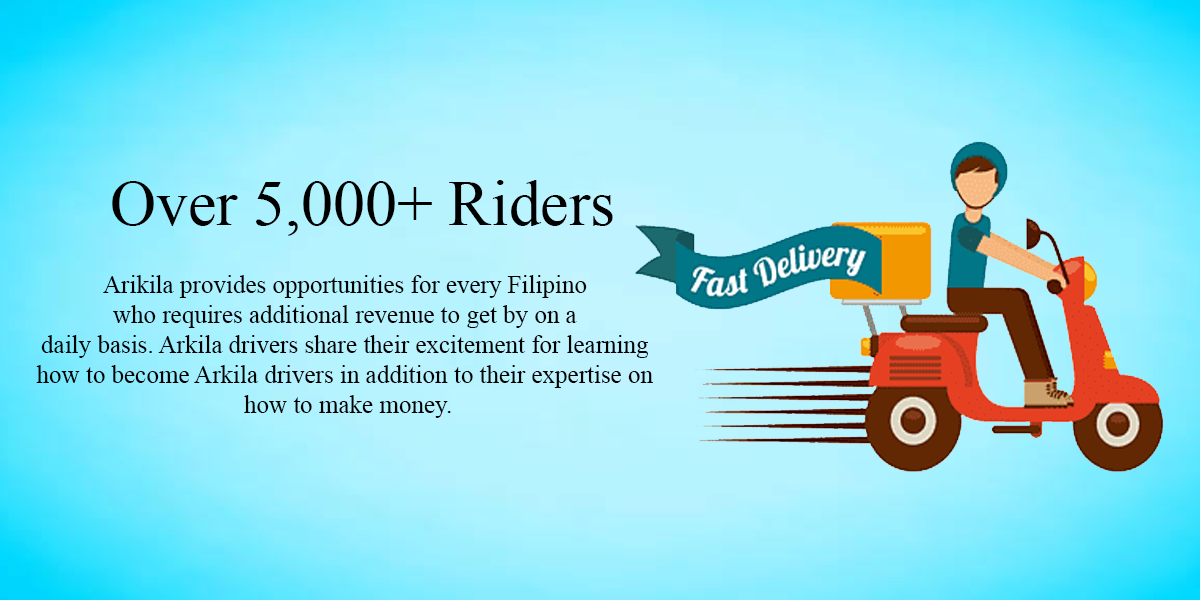
<style>
.page{position:relative;width:1200px;height:600px}
.page>*{position:absolute;margin:0}
.t1{font:64.2px "TimesNewRomanPSMT";color:#000000}
.t2{font:25px "TimesNewRomanPSMT";color:#000000}
</style>
<div class="page">
<p class="t1" style="left:112px;top:180px;width:501px;height:56px">Over 5,000+ Riders</p>
<p class="t2" style="left:36px;top:275px;width:617px;height:143px;text-align:center">Arikila provides opportunities for every Filipino <br>who requires additional revenue to get by on a <br>daily basis. Arkila drivers share their excitement for learning <br>how to become Arkila drivers in addition to their expertise on <br>how to make money.</p>
</div>
